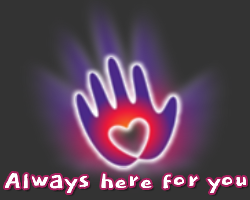
<style>
.page{position:relative;width:250px;height:200px;background:#333333}
.page>*{position:absolute;margin:0}
.t1{font:30px "Dokdo-Regular";color:#ffffff}
</style>
<div class="page">
<p class="t1" style="left:4px;top:173px;width:242px;height:21px">Always here for you</p>
</div>
